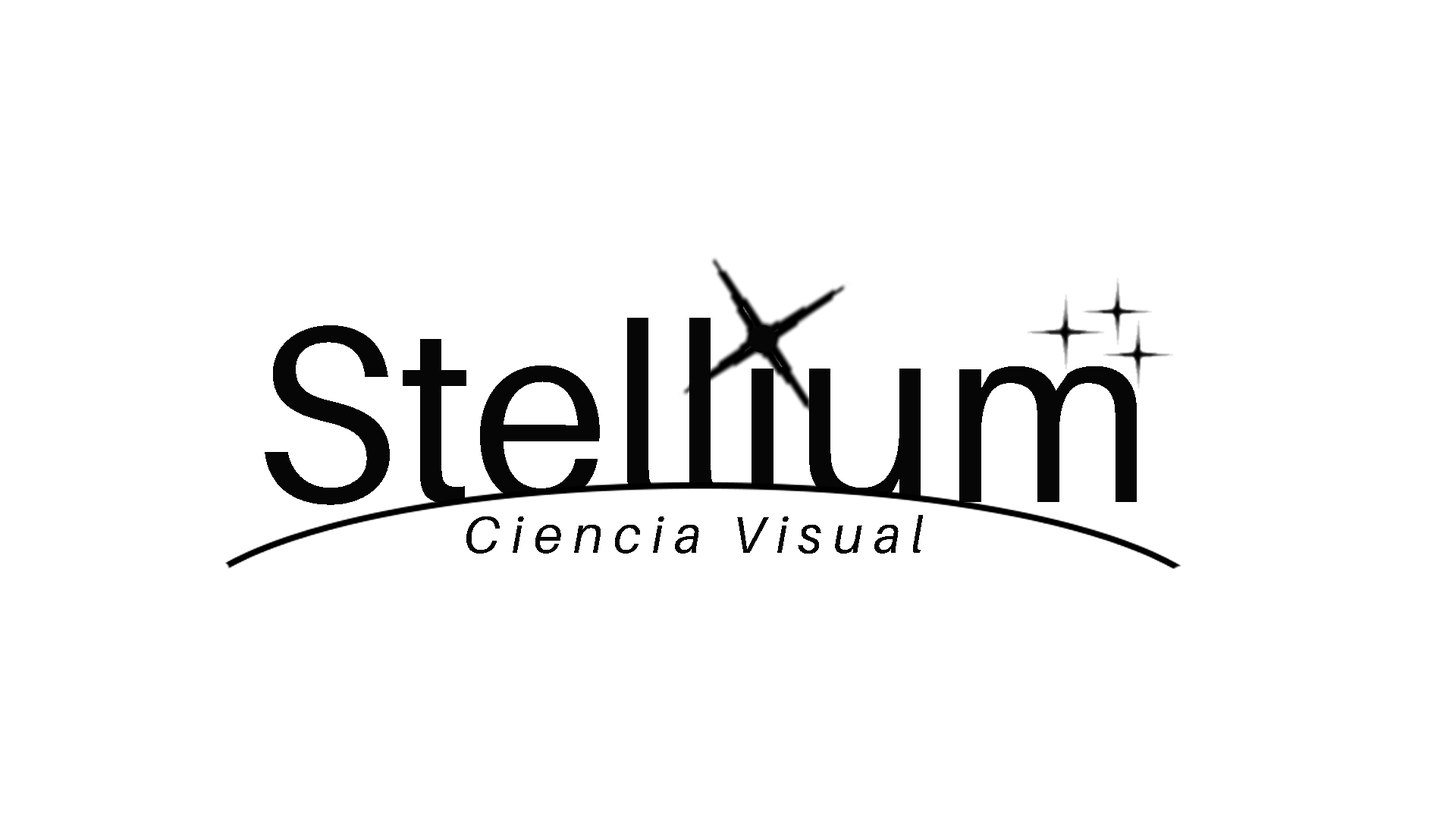
<style>
.page{position:relative;width:1456px;height:819px;background:#ffffff}
.page>*{position:absolute;margin:0}
.t1{font:250px "Aileron-Regular";color:#060606}
.t2{font:52.1px "Aileron-Italic";letter-spacing:0.2em;color:#060606}
</style>
<div class="page">
<p class="t1" style="left:265px;top:318px;width:872px;height:187px">Stellium</p>
<p class="t2" style="left:466px;top:515px;width:457px;height:39px">Ciencia Visual</p>
</div>
